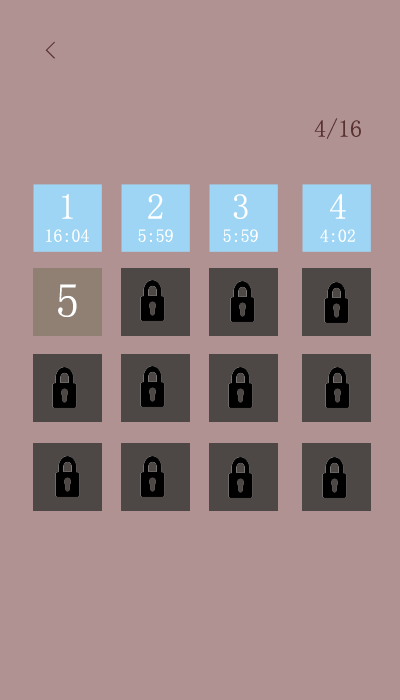
<style>
.page{position:relative;width:400px;height:700px;background:#b09292}
.page>*{position:absolute;margin:0}
.t1{font:24px "SimSun";color:#5a3131}
.t2{font:36px "SimSun";color:#ffffff}
.t3{font:18px "SimSun";color:#ffffff}
.t4{font:48px "SimSun";color:#ffffff}
</style>
<div class="page">
<p class="t1" style="left:45px;top:41px;width:10px;height:18px">&lt;</p>
<p class="t1" style="left:314px;top:118px;width:47px;height:21px">4/16</p>
<p class="t2" style="left:148px;top:194px;width:15px;height:25px">2</p>
<p class="t2" style="left:233px;top:194px;width:15px;height:25px">3</p>
<p class="t2" style="left:330px;top:194px;width:16px;height:25px">4</p>
<p class="t3" style="left:138px;top:229px;width:35px;height:13px">5:59</p>
<p class="t3" style="left:223px;top:229px;width:35px;height:13px">5:59</p>
<p class="t3" style="left:320px;top:229px;width:35px;height:13px">4:02</p>
<p class="t4" style="left:58px;top:284px;width:19px;height:33px">5</p>
</div>
